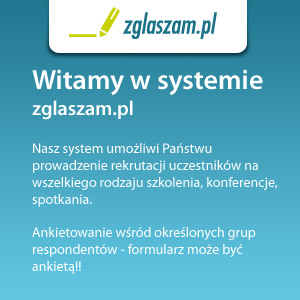
<style>
.page{position:relative;width:300px;height:300px}
.page>*{position:absolute;margin:0}
.t1{font:14px "MyriadPro-Regular";color:#ffffff}
.t2{font:28px "MyriadPro-Semibold";color:#ffffff}
.t3{font:20px/26px "MyriadPro-Semibold";color:#ffffff}
</style>
<div class="page">
<p class="t1" style="left:32px;top:69px;width:246px;height:205px"><span class="t2">Witamy w systemie<br></span><span class="t3">zglaszam.pl<br><br></span>Nasz system umożliwi Państwu prowadzenie rekrutacji uczestników na wszelkiego rodzaju szkolenia, konferencje, spotkania. <br><br>Ankietowanie wśród określonych grup respondentów - formularz może być ankietą!!</p>
</div>
